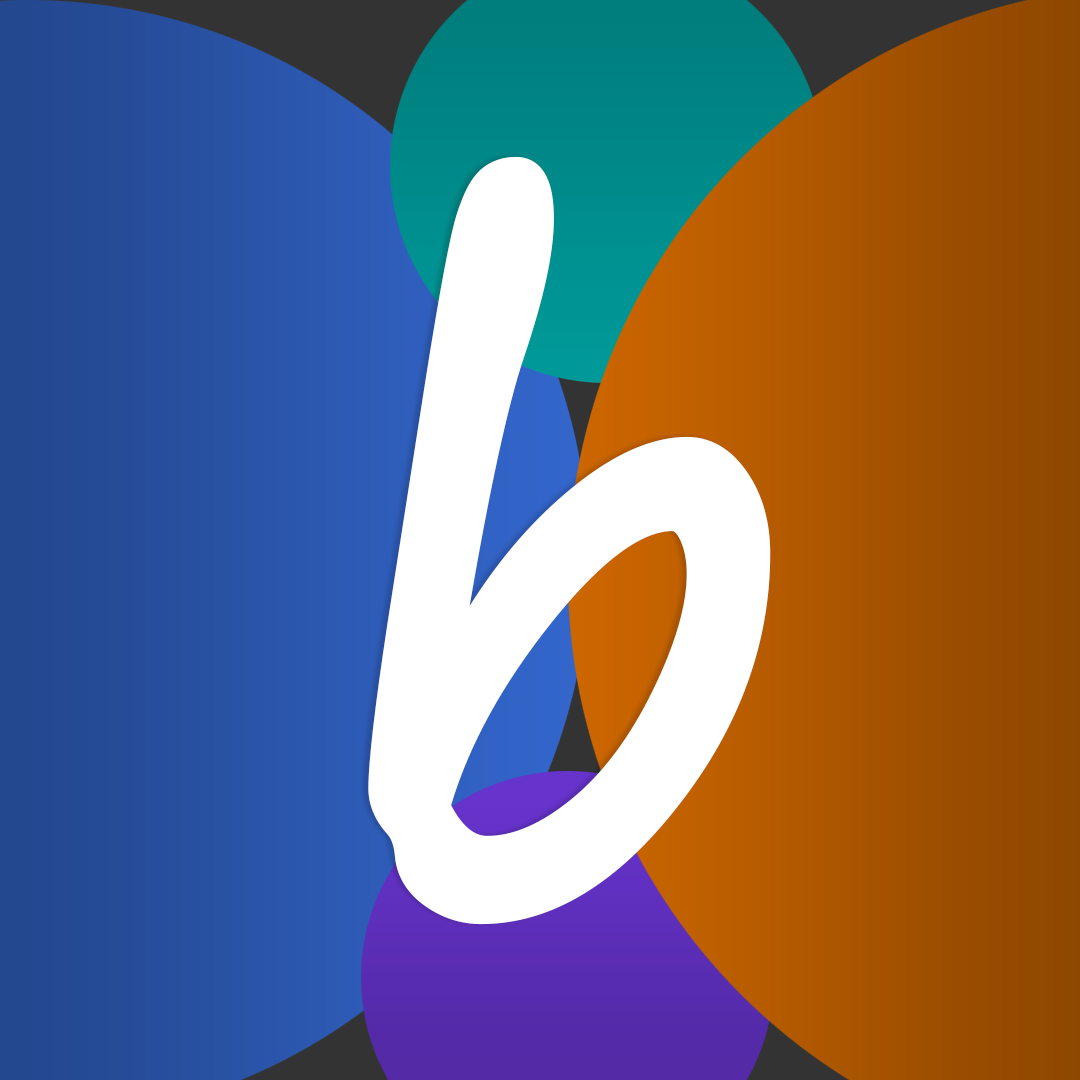
<style>
.page{position:relative;width:1080px;height:1080px}
.page>*{position:absolute;margin:0}
.t1{font:858px "SegoePrint";color:#ffffff;font-weight:bold;scale:0.91 1}
</style>
<div class="page">
<p class="t1" style="left:368px;top:156px;width:403px;height:769px">b</p>
</div>
